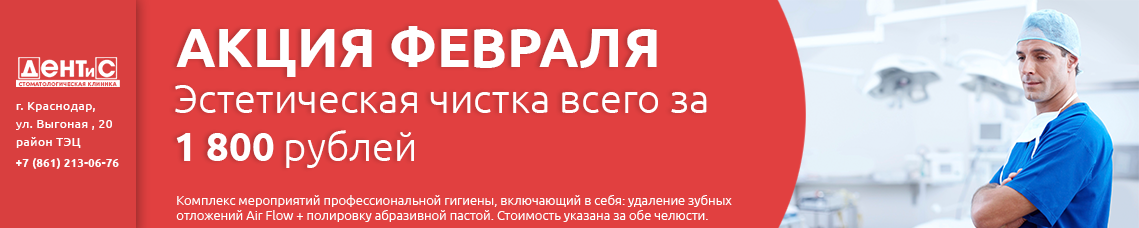
<style>
.page{position:relative;width:1139px;height:228px;background:#e14040}
.page>*{position:absolute;margin:0}
.t1{font:55px "Ubuntu-Bold";color:#ffffff;text-transform:uppercase}
.t2{font:5.3px "Ubuntu-Bold";letter-spacing:0.04em;color:#e14040;text-transform:uppercase}
.t3{font:40px "Ubuntu-Light";color:#ffffff}
.t4{font:40px "Ubuntu-Bold";color:#ffffff}
.t5{font:12px/18px "Ubuntu-Regular";letter-spacing:0.04em;color:#ffffff}
.t6{font:11px "Ubuntu-Bold";letter-spacing:0.04em;color:#fefefe}
.t7{font:13px "Ubuntu-Light";color:#ffffff}
</style>
<div class="page">
<p class="t1" style="left:176px;top:26px;width:481px;height:51px">акция февраля</p>
<p class="t2" style="left:18px;top:82px;width:99px;height:5px">стоматологическая клиника</p>
<p class="t3" style="left:175px;top:85px;width:532px;height:83px">Эстетическая чистка всего за <br><span class="t4">1 800</span> рублей</p>
<p class="t5" style="left:16px;top:102px;width:96px;height:46px">г. Краснодар, <br>ул. Выгоная , 20<br>район ТЭЦ</p>
<p class="t6" style="left:16px;top:158px;width:103px;height:11px">+7 (861) 213-06-76</p>
<p class="t7" style="left:176px;top:195px;width:556px;height:27px">Комплекс мероприятий профессиональной гигиены, включающий в себя: удаление зубных <br>отложений Air Flow + полировку абразивной пастой. Стоимость указана за обе челюсти.</p>
</div>
